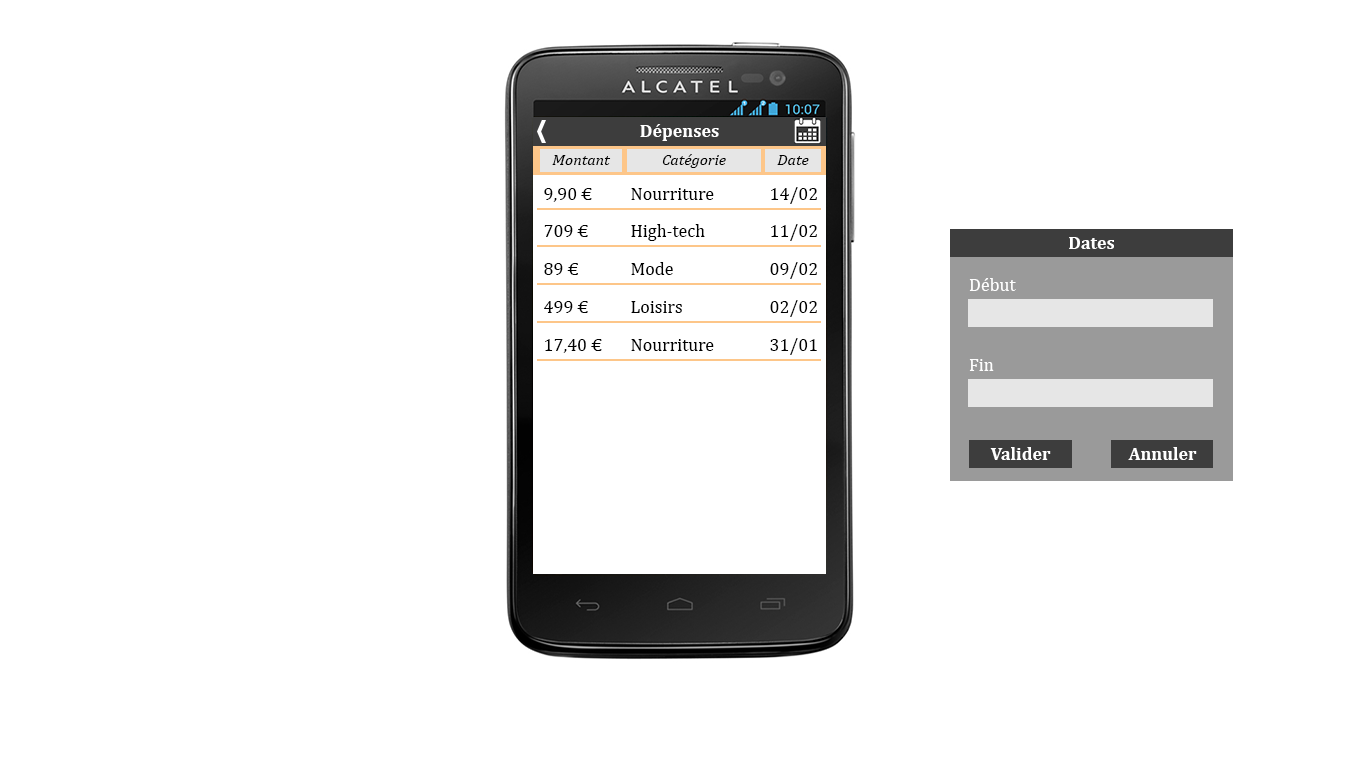
<style>
.page{position:relative;width:1366px;height:768px;background:#ffffff}
.page>*{position:absolute;margin:0}
.t1{font:18px "Cambria-Bold";color:#ffffff}
.t2{font:16px "Cambria-Italic";color:#000000}
.t3{font:18px "Cambria";color:#000000}
.t4{font:18px "Cambria";color:#ffffff}
</style>
<div class="page">
<p class="t1" style="left:640px;top:124px;width:79px;height:17px">Dépenses</p>
<p class="t2" style="left:552px;top:155px;width:59px;height:10px">Montant</p>
<p class="t2" style="left:662px;top:154px;width:64px;height:14px">Catégorie</p>
<p class="t2" style="left:777px;top:155px;width:32px;height:10px">Date</p>
<p class="t3" style="left:544px;top:188px;width:48px;height:14px">9,90 €</p>
<p class="t3" style="left:631px;top:188px;width:83px;height:12px">Nourriture</p>
<p class="t3" style="left:771px;top:187px;width:46px;height:17px">14/02</p>
<p class="t3" style="left:544px;top:225px;width:44px;height:12px">709 €</p>
<p class="t3" style="left:631px;top:224px;width:74px;height:17px">High-tech</p>
<p class="t3" style="left:771px;top:224px;width:46px;height:17px">11/02</p>
<p class="t1" style="left:1069px;top:237px;width:45px;height:12px">Dates</p>
<p class="t3" style="left:544px;top:263px;width:34px;height:12px">89 €</p>
<p class="t3" style="left:631px;top:262px;width:42px;height:13px">Mode</p>
<p class="t3" style="left:770px;top:262px;width:47px;height:17px">09/02</p>
<p class="t4" style="left:969px;top:278px;width:47px;height:13px">Début</p>
<p class="t3" style="left:544px;top:301px;width:44px;height:12px">499 €</p>
<p class="t3" style="left:631px;top:301px;width:51px;height:12px">Loisirs</p>
<p class="t3" style="left:770px;top:300px;width:47px;height:17px">02/02</p>
<p class="t3" style="left:545px;top:339px;width:57px;height:14px">17,40 €</p>
<p class="t3" style="left:631px;top:339px;width:83px;height:12px">Nourriture</p>
<p class="t3" style="left:770px;top:338px;width:47px;height:17px">31/01</p>
<p class="t4" style="left:969px;top:359px;width:25px;height:12px">Fin</p>
<p class="t1" style="left:990px;top:447px;width:61px;height:13px">Valider</p>
<p class="t1" style="left:1128px;top:447px;width:69px;height:13px">Annuler</p>
</div>
